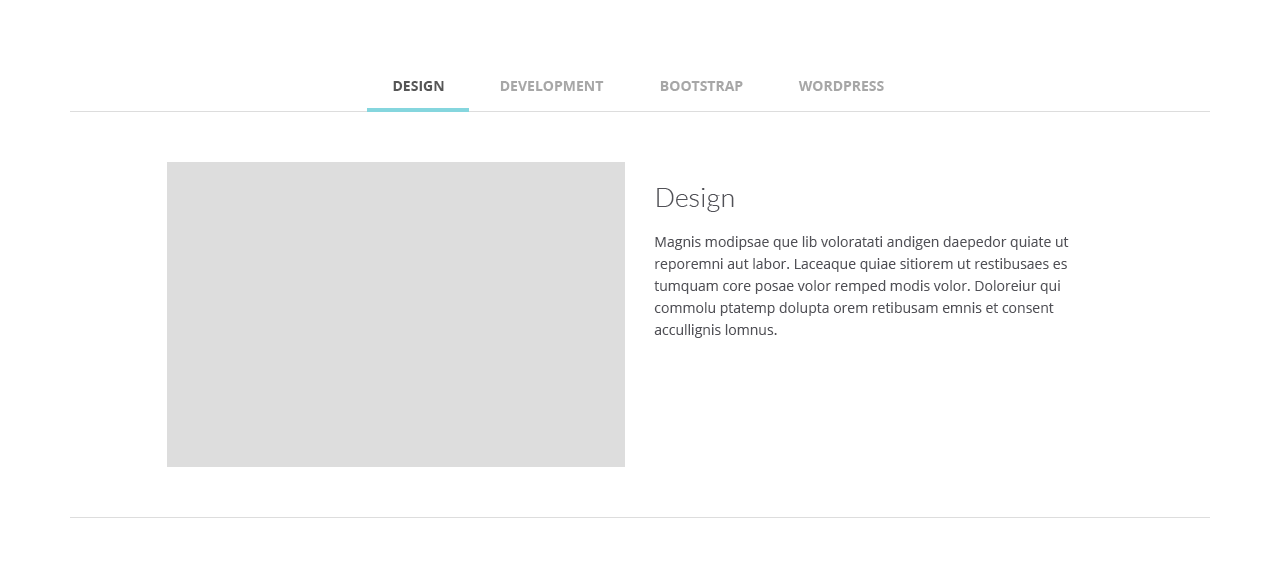
<style>
.page{position:relative;width:1280px;height:578px;background:#ffffff}
.page>*{position:absolute;margin:0}
.t1{font:14px "OpenSans-Bold";color:#565656}
.t2{font:14px "OpenSans-Bold";color:#a7a7a7}
.t3{font:27px "Lato-Light";color:#515157}
.t4{font:14px/22px "OpenSans";color:#515157}
</style>
<div class="page">
<p class="t1" style="left:393px;top:81px;width:51px;height:10px">DESIGN</p>
<p class="t2" style="left:500px;top:81px;width:104px;height:10px">DEVELOPMENT</p>
<p class="t2" style="left:660px;top:81px;width:83px;height:10px">BOOTSTRAP</p>
<p class="t2" style="left:798px;top:81px;width:86px;height:10px">WORDPRESS</p>
<p class="t3" style="left:657px;top:188px;width:77px;height:24px">Design</p>
<p class="t4" style="left:654px;top:236px;width:415px;height:102px">Magnis modipsae que lib voloratati andigen daepedor quiate ut reporemni aut labor. Laceaque quiae sitiorem ut restibusaes es tumquam core posae volor remped modis volor. Doloreiur qui commolu ptatemp dolupta orem retibusam emnis et consent accullignis lomnus.</p>
</div>
